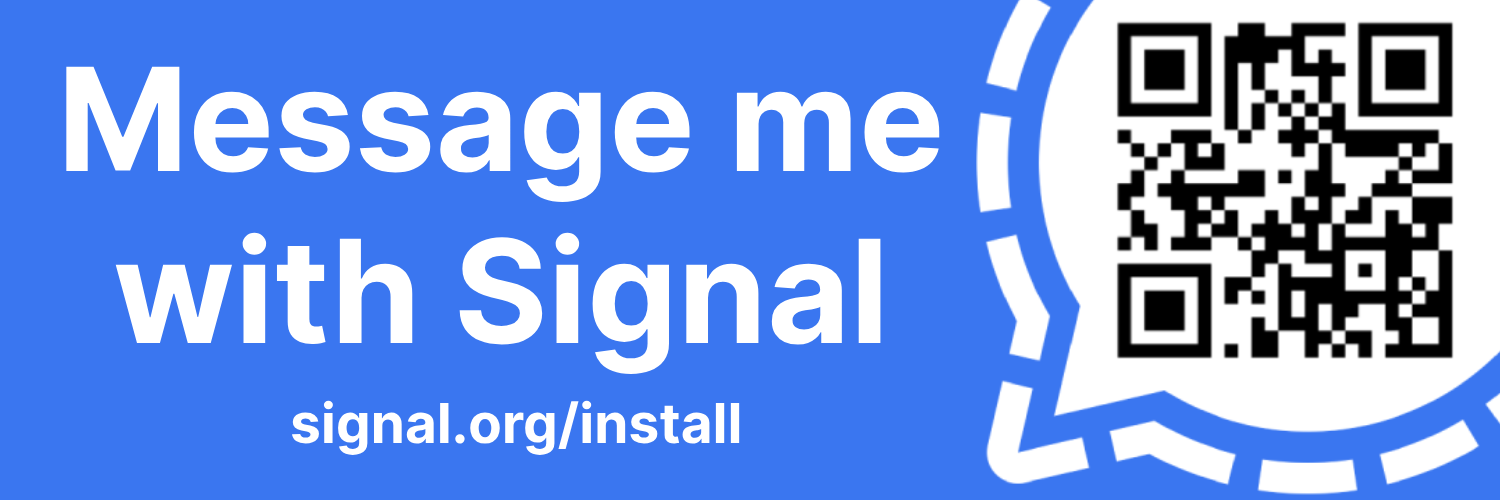
<style>
.page{position:relative;width:1500px;height:500px;background:#3a76f0}
.page>*{position:absolute;margin:0}
.t1{font:143.4px "InterV-Bold";color:#ffffff}
.t2{font:55px "InterV-Bold";color:#ffffff}
</style>
<div class="page">
<p class="t1" style="left:66px;top:66px;width:874px;height:308px;text-align:center">Message me <br>with Signal</p>
<p class="t2" style="left:292px;top:400px;width:448px;height:55px">signal.org/install</p>
</div>
